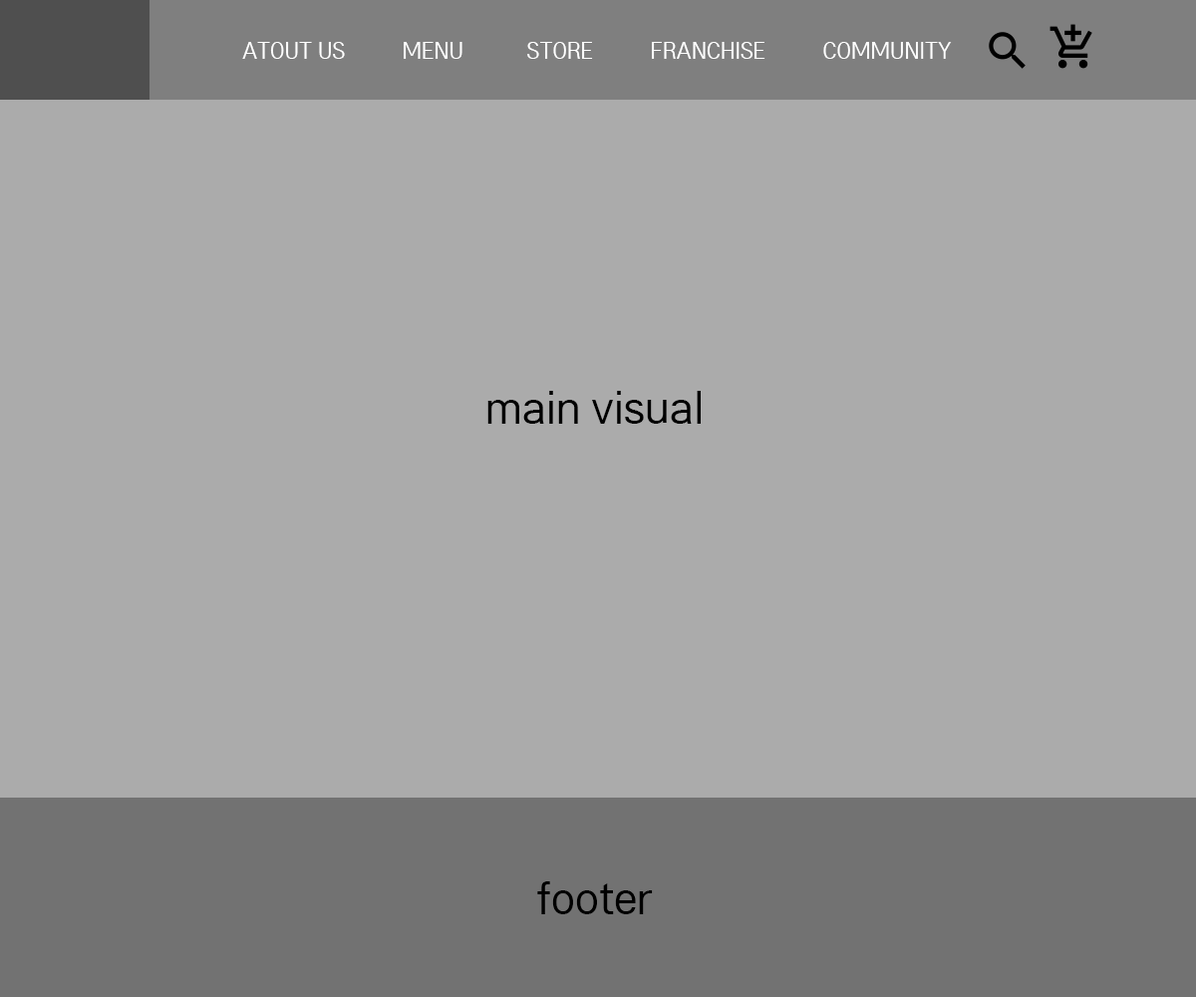
<style>
.page{position:relative;width:1196px;height:997px;background:#ababab}
.page>*{position:absolute;margin:0}
.t1{font:23.9px "LGPC";color:#ffffff}
.t2{font:47.8px "LGPC";color:#000000}
</style>
<div class="page">
<p class="t1" style="left:242px;top:42px;width:710px;height:17px">ATOUT US          MENU           STORE          FRANCHISE          COMMUNITY</p>
<p class="t2" style="left:487px;top:391px;width:214px;height:33px">main visual</p>
<p class="t2" style="left:537px;top:881px;width:116px;height:33px">footer</p>
</div>
